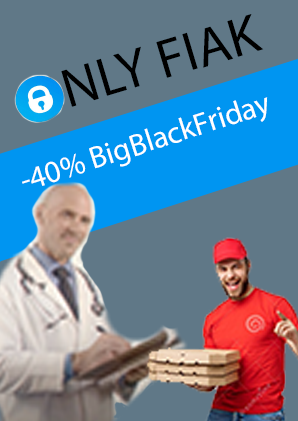
<style>
.page{position:relative;width:298px;height:421px;background:#607887}
.page>*{position:absolute;margin:0}
.t1{font:55.2px "MyriadPro-Regular";color:#000000}
.t2{font:31.1px "MyriadPro-Regular";color:#ffffff}
</style>
<div class="page">
<p class="t1" style="left:27px;top:14px;width:237px;height:101px;rotate:-17deg">ONLY FIAK</p>
<p class="t2" style="left:22px;top:97px;width:246px;height:89px;rotate:-18deg">-40% BigBlackFriday</p>
</div>
